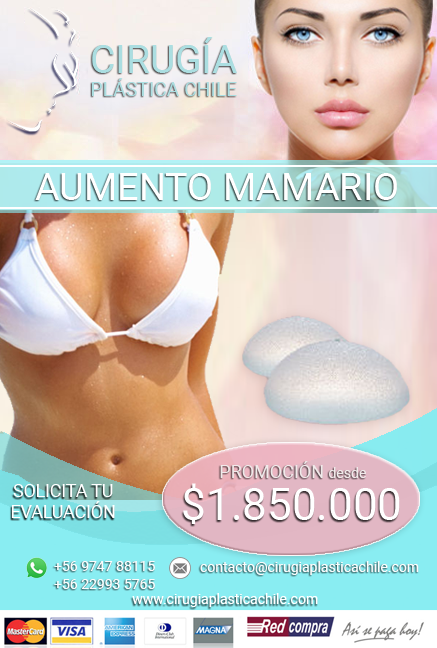
<style>
.page{position:relative;width:437px;height:648px}
.page>*{position:absolute;margin:0}
.t1{font:19.4px "Roboto-Regular";color:#abdee1}
.t2{font:38.8px "Roboto-Regular";color:#abdee1}
.t3{font:38px "Roboto-Regular";color:#ffffff}
.t4{font:18px "Roboto-Regular";color:#f0eaea}
.t5{font:14px "Roboto-Regular";color:#f0eaea}
.t6{font:18px "Roboto-Regular";letter-spacing:-0.01em;color:#ffffff}
.t7{font:44px "Roboto-Regular";color:#ffffff}
.t8{font:14px/18px "Roboto-Regular";color:#fcfcfc}
.t9{font:14px "Roboto-Regular";color:#fcfcfc}
.t10{font:14px "Roboto-Regular";color:#ffffff}
</style>
<div class="page">
<p class="t1" style="left:91px;top:37px;width:146px;height:59px;text-align:center"><span class="t2">CIRUGÍA<br></span>PLÁSTICA CHILE</p>
<p class="t3" style="left:35px;top:173px;width:362px;height:27px">AUMENTO MAMARIO</p>
<p class="t4" style="left:220px;top:461px;width:146px;height:17px">PROMOCIÓN <span class="t5">desde</span></p>
<p class="t6" style="left:11px;top:484px;width:104px;height:34px;text-align:center">SOLICITA TU<br>EVALUACIÓN</p>
<p class="t7" style="left:183px;top:483px;width:217px;height:41px">$1.850.000</p>
<p class="t8" style="left:54px;top:561px;width:101px;height:28px">+56 9747 88115<br>+56 22993 5765</p>
<p class="t9" style="left:200px;top:561px;width:219px;height:14px">contacto@cirugiaplasticachile.com</p>
<p class="t10" style="left:132px;top:593px;width:186px;height:14px">www.cirugiaplasticachile.com</p>
</div>
